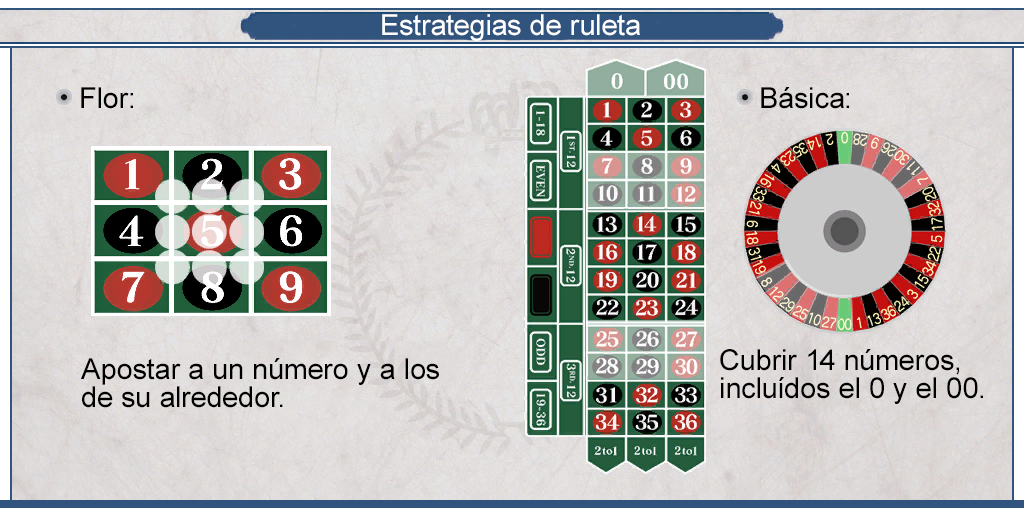
<style>
.page{position:relative;width:1024px;height:512px}
.page>*{position:absolute;margin:0}
.t1{font:29px "ArialMT";color:#fefefe}
.t2{font:29px "ArialMT";color:#000000}
.t3{font:29px/28px "ArialMT";color:#000000}
</style>
<div class="page">
<p class="t1" style="left:382px;top:14px;width:258px;height:27px">Estrategias de ruleta</p>
<p class="t2" style="left:81px;top:87px;width:52px;height:22px">Flor:</p>
<p class="t2" style="left:761px;top:87px;width:88px;height:22px">Básica:</p>
<p class="t3" style="left:720px;top:349px;width:263px;height:55px">Cubrir 14 números, <br>incluídos el 0 y el 00.</p>
<p class="t3" style="left:81px;top:358px;width:358px;height:50px">Apostar a un número y a los <br>de su alrededor.</p>
</div>
